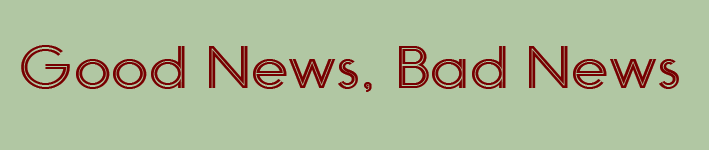
<style>
.page{position:relative;width:709px;height:150px;background:#b1c7a3}
.page>*{position:absolute;margin:0}
.t1{font:69.7px "Monopoly-Inline";color:#760001;scale:1.12 1}
</style>
<div class="page">
<p class="t1" style="left:21px;top:45px;width:658px;height:47px">Good News, Bad News</p>
</div>
